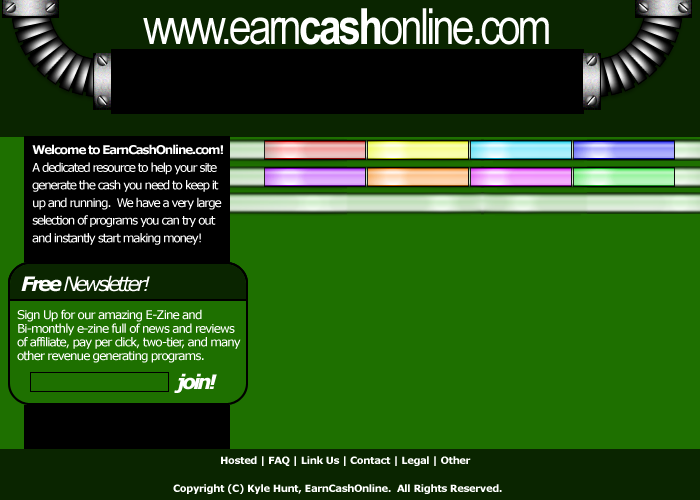
<style>
.page{position:relative;width:700px;height:500px;background:#1e7000}
.page>*{position:absolute;margin:0}
.t1{font:50px "ArialNarrow";letter-spacing:-0.06em;color:#ffffff}
.t2{font:50px "ArialNarrow-Bold";letter-spacing:-0.06em;color:#ffffff}
.t3{font:12px/17.6px "Verdana";letter-spacing:-0.1em;color:#ffffff}
.t4{font:12px/25.6px "Verdana-Bold";letter-spacing:-0.1em;color:#ffffff}
.t5{font:10px "Verdana-Bold";letter-spacing:-0.04em;color:#ffffff}
</style>
<div class="page">
<p class="t1" style="left:143px;top:8px;width:406px;height:37px">www.earn<span class="t2">cash</span>online.com</p>
<p class="t3" style="left:32px;top:144px;width:191px;height:101px"><span class="t4">Welcome to EarnCashOnline.com!<br></span>A dedicated resource to help your site<br>generate the cash you need to keep it<br>up and running.  We have a very large<br>selection of programs you can try out<br>and instantly start making money!</p>
<p class="t5" style="left:221px;top:456px;width:250px;height:10px">Hosted | FAQ | Link Us | Contact | Legal | Other</p>
<p class="t5" style="left:173px;top:484px;width:329px;height:10px">Copyright (C) Kyle Hunt, EarnCashOnline.  All Rights Reserved.</p>
</div>
